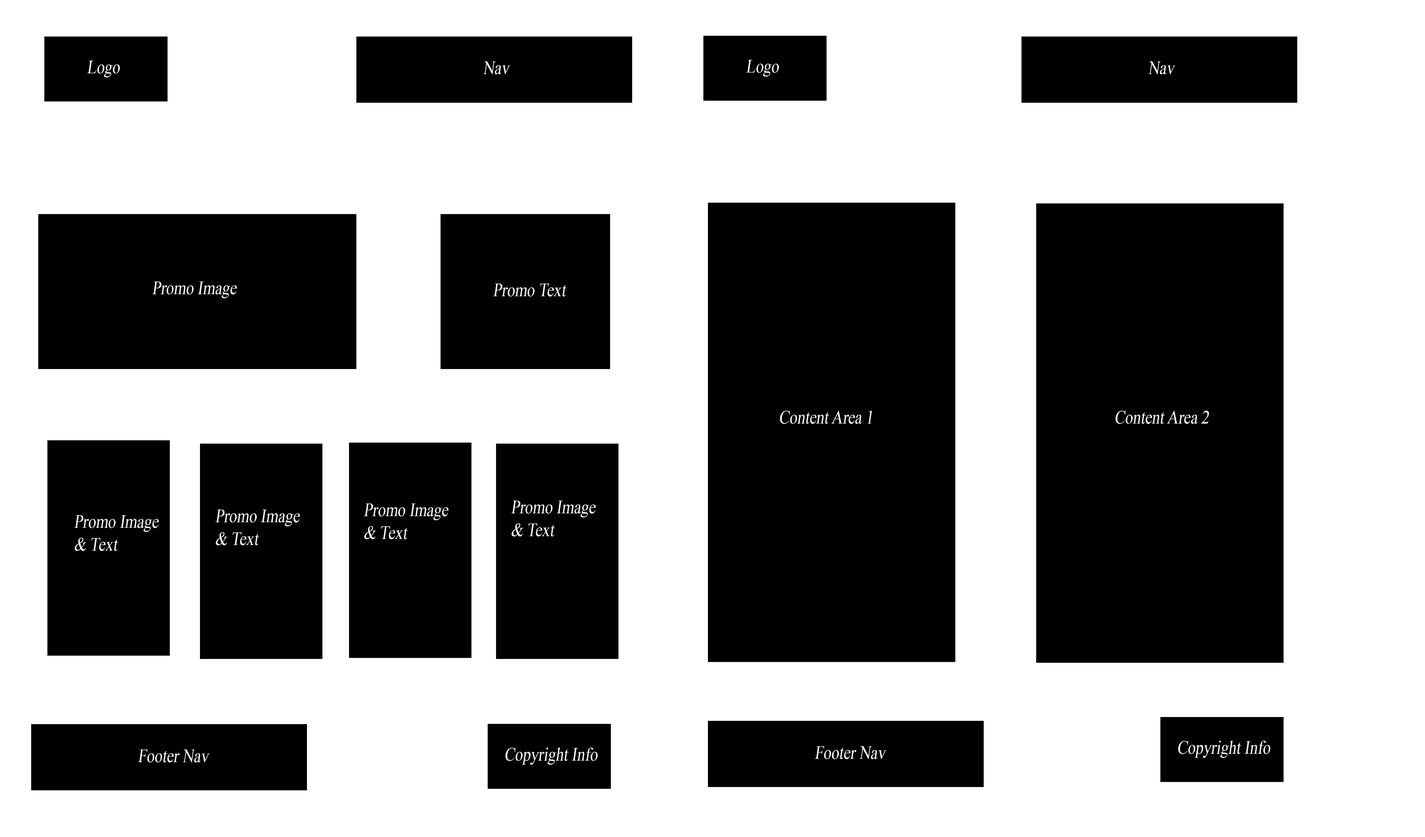
<style>
.page{position:relative;width:1425px;height:837px;background:#ffffff}
.page>*{position:absolute;margin:0}
.t1{font:19px "TimesNewRomanPSMT";color:#f8f6f6;font-style:italic;scale:0.82 1}
</style>
<div class="page">
<p class="t1" style="left:87px;top:61px;width:33px;height:16px">Logo</p>
<p class="t1" style="left:483px;top:61px;width:27px;height:13px">Nav</p>
<p class="t1" style="left:746px;top:60px;width:33px;height:17px">Logo</p>
<p class="t1" style="left:1148px;top:61px;width:28px;height:13px">Nav</p>
<p class="t1" style="left:152px;top:281px;width:85px;height:17px">Promo Image</p>
<p class="t1" style="left:493px;top:283px;width:74px;height:13px">Promo Text</p>
<p class="t1" style="left:780px;top:410px;width:92px;height:14px">Content Area 1</p>
<p class="t1" style="left:1116px;top:410px;width:93px;height:14px">Content Area 2</p>
<p class="t1" style="left:215px;top:509px;width:85px;height:36px">Promo Image<br>&amp; Text</p>
<p class="t1" style="left:364px;top:503px;width:85px;height:36px">Promo Image <br>&amp; Text</p>
<p class="t1" style="left:511px;top:500px;width:85px;height:36px">Promo Image<br>&amp; Text</p>
<p class="t1" style="left:74px;top:515px;width:85px;height:36px">Promo Image<br>&amp; Text</p>
<p class="t1" style="left:138px;top:749px;width:72px;height:13px">Footer Nav</p>
<p class="t1" style="left:506px;top:747px;width:92px;height:17px">Copyright Info</p>
<p class="t1" style="left:815px;top:746px;width:72px;height:13px">Footer Nav</p>
<p class="t1" style="left:1178px;top:740px;width:93px;height:18px">Copyright Info</p>
</div>
